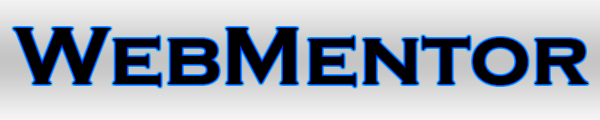
<style>
.page{position:relative;width:600px;height:120px}
.page>*{position:absolute;margin:0}
.t1{font:83.8px "CopperplateGothic-Bold";color:#000000}
</style>
<div class="page">
<p class="t1" style="left:13px;top:28px;width:575px;height:59px">WebMentor</p>
</div>
